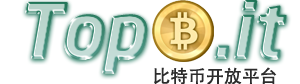
<style>
.page{position:relative;width:300px;height:84px;background:#ffffff}
.page>*{position:absolute;margin:0}
.t1{font:75.3px "NeoSans-BoldItalic";letter-spacing:-0.025em}
.t2{font:18px "AdobeHeitiStd-Regular";color:#2c2c2c}
</style>
<div class="page">
<p class="t1" style="left:26px;top:0px;width:261px;height:73px">Top    .it</p>
<p class="t2" style="left:154px;top:67px;width:123px;height:18px">比特币开放平台</p>
</div>
